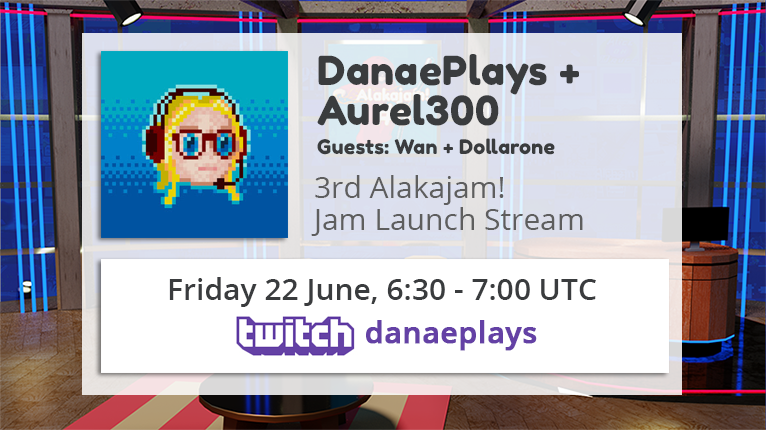
<style>
.page{position:relative;width:766px;height:430px}
.page>*{position:absolute;margin:0}
.t1{font:20px/29px "FredokaOne-Regular";letter-spacing:0.01em;color:#3a3c3e}
.t2{font:40px/40px "FredokaOne-Regular";letter-spacing:0.01em;color:#3a3c3e}
.t3{font:30px/32px "OpenSans";color:#5e5e5e}
.t4{font:30px/43px "OpenSans-Semibold";color:#3a3c3e}
.t5{font:30px/43px "OpenSans-Semibold";color:#6441a5;font-weight:bold}
</style>
<div class="page">
<p class="t1" style="left:317px;top:54px;width:262px;height:101px"><span class="t2">DanaePlays +<br>Aurel300<br></span>Guests: Wan + Dollarone</p>
<p class="t3" style="left:311px;top:175px;width:272px;height:61px">3rd Alakajam!<br>Jam Launch Stream</p>
<p class="t4" style="left:169px;top:277px;width:427px;height:74px;text-align:center">Friday 22 June, 6:30 - 7:00 UTC<br><span class="t5">                danaeplays</span></p>
</div>
